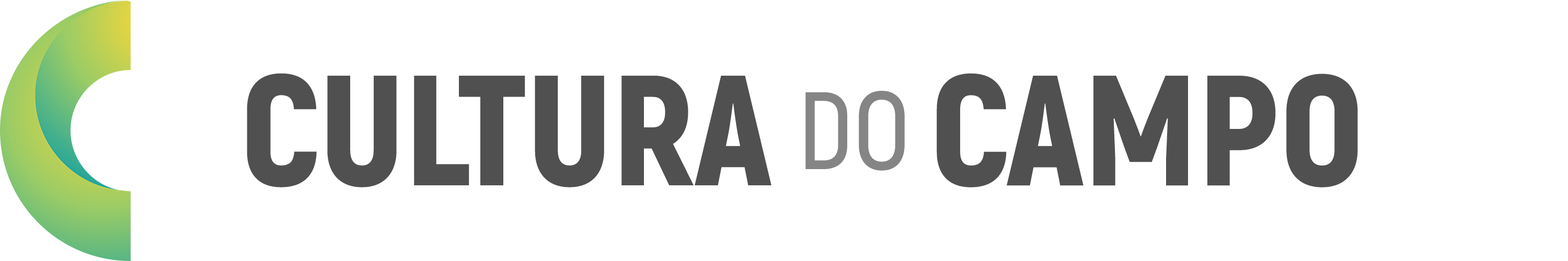
<style>
.page{position:relative;width:1568px;height:261px;background:#ffffff}
.page>*{position:absolute;margin:0}
.t1{font:156.8px "Akrobat-Black";color:#505050;text-transform:uppercase}
.t2{font:109.8px "Akrobat-SemiBold";color:#858585;text-transform:uppercase}
</style>
<div class="page">
<p class="t1" style="left:247px;top:73px;width:524px;height:115px">cultura</p>
<p class="t1" style="left:937px;top:73px;width:421px;height:115px">campo</p>
<p class="t2" style="left:805px;top:91px;width:100px;height:80px">do</p>
</div>
